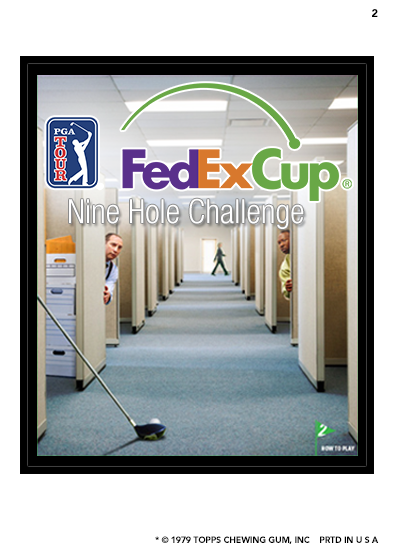
<style>
.page{position:relative;width:394px;height:554px;background:#ffffff}
.page>*{position:absolute;margin:0}
.t1{font:11.1px "Avenir-Black";letter-spacing:-0.025em;color:#000000}
.t2{font:33.3px "HelveticaNeueLTStd-LtCn";color:#fefefe}
.t3{font:8.9px "Avenir-Black";letter-spacing:-0.025em;color:#000000}
</style>
<div class="page">
<p class="t1" style="left:372px;top:9px;width:6px;height:8px">2</p>
<p class="t2" style="left:69px;top:198px;width:235px;height:31px">Nine Hole Challenge</p>
<p class="t3" style="left:155px;top:536px;width:224px;height:8px">* © 1979 TOPPS CHEWING GUM, INC    PRTD IN U S A</p>
</div>
